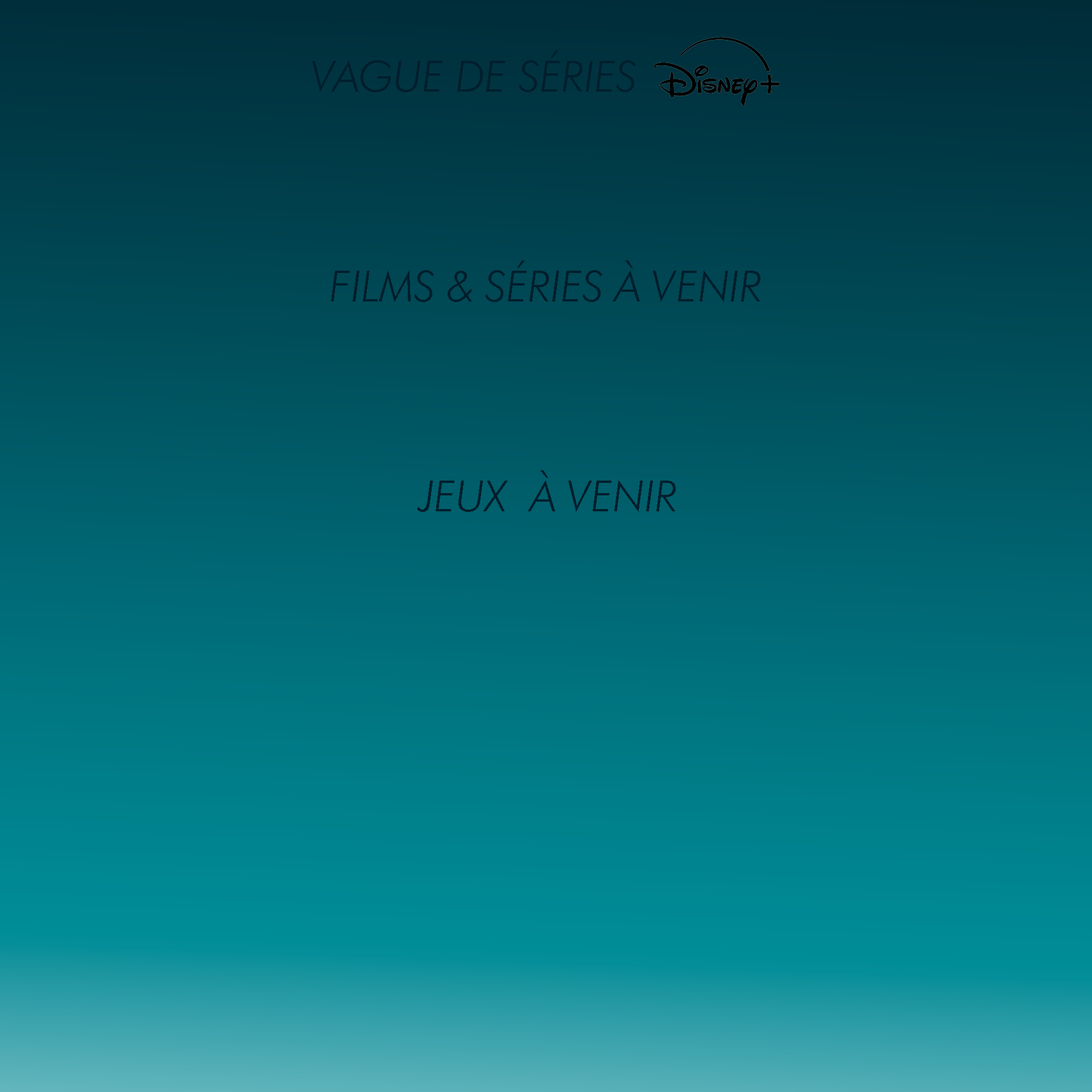
<style>
.page{position:relative;width:1092px;height:1092px}
.page>*{position:absolute;margin:0}
.t1{font:42.7px "FuturaBT-LightItalic";color:#021e2c}
</style>
<div class="page">
<p class="t1" style="left:312px;top:51px;width:324px;height:41px">VAGUE DE SÉRIES</p>
<p class="t1" style="left:331px;top:260px;width:429px;height:42px">FILMS &amp; SÉRIES À VENIR</p>
<p class="t1" style="left:417px;top:470px;width:259px;height:42px">JEUX  À VENIR</p>
</div>
